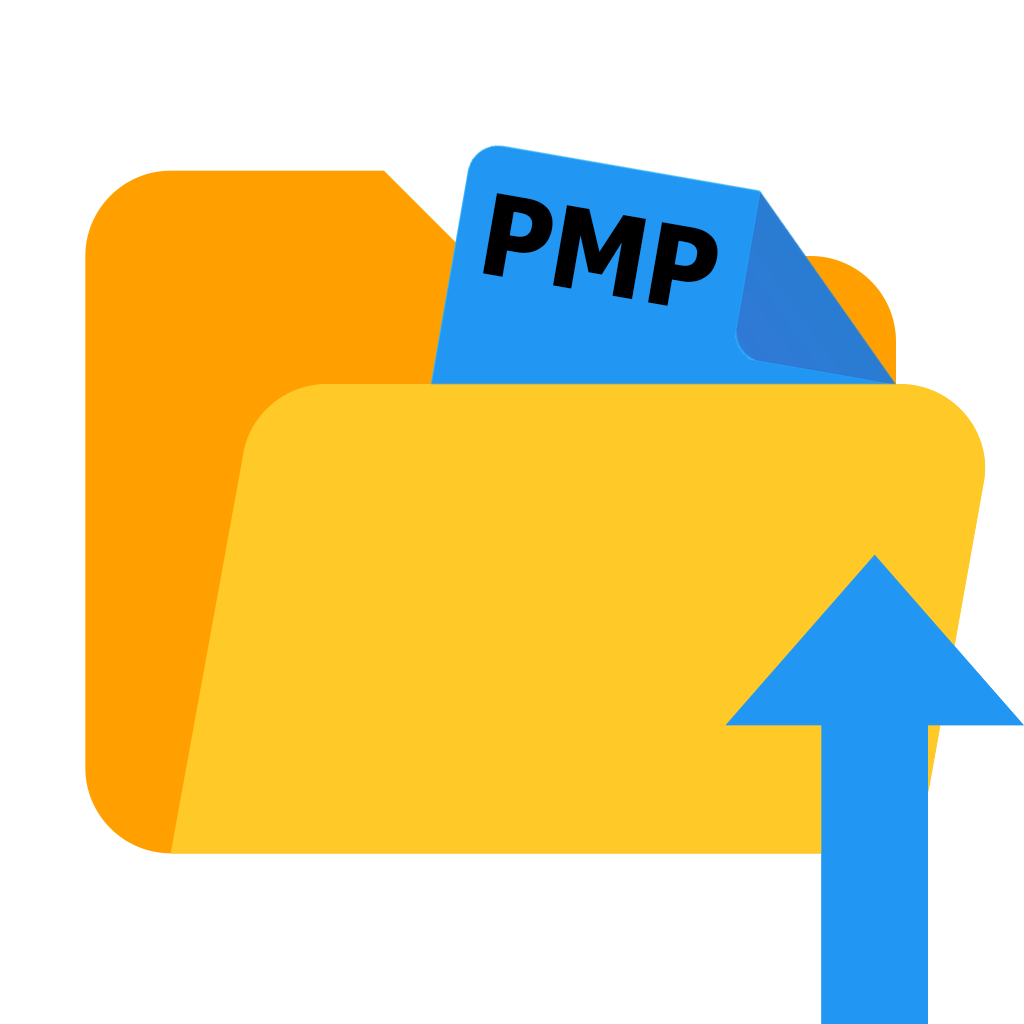
<style>
.page{position:relative;width:1024px;height:1024px;background:#ffffff}
.page>*{position:absolute;margin:0}
.t1{font:112.1px "Tahoma-Bold";color:#000000;scale:0.96 1}
</style>
<div class="page">
<p class="t1" style="left:483px;top:193px;width:235px;height:113px;rotate:10deg">PMP</p>
</div>
